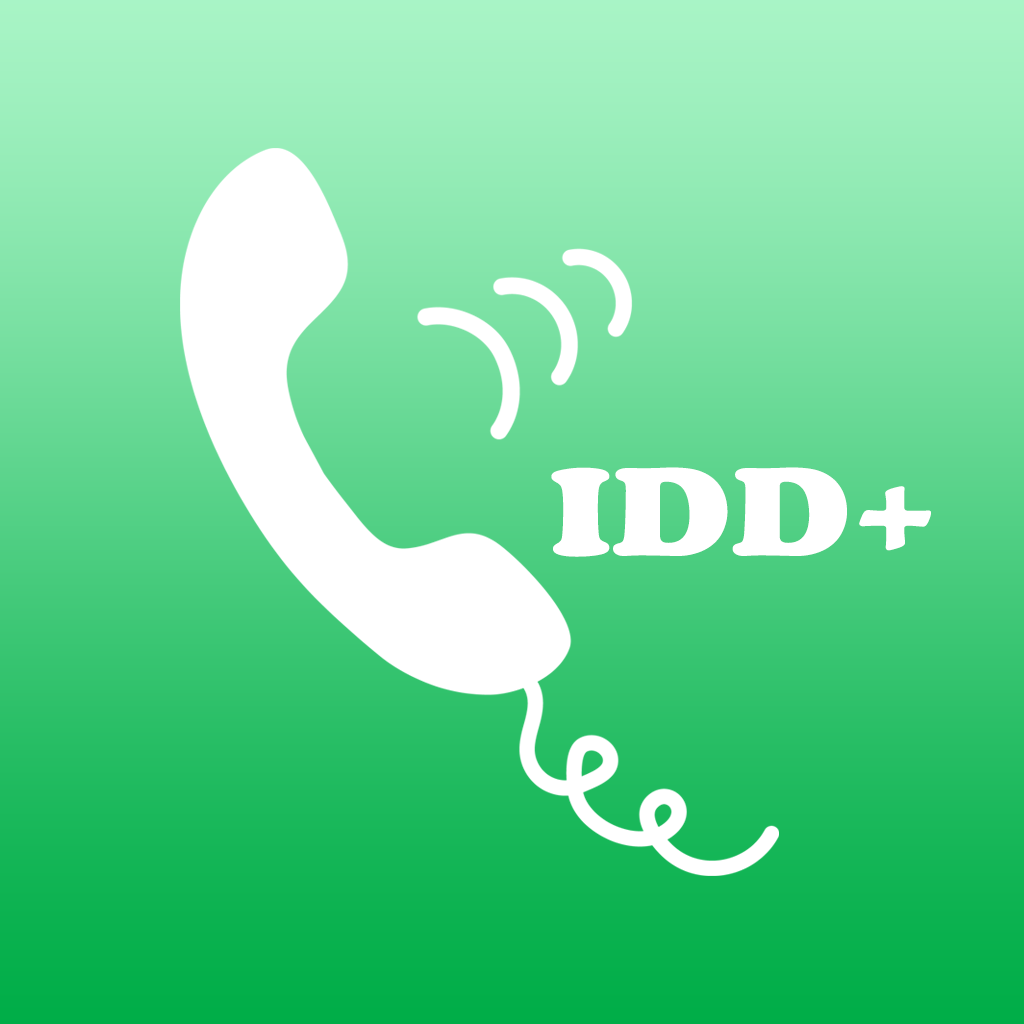
<style>
.page{position:relative;width:1024px;height:1024px}
.page>*{position:absolute;margin:0}
.t1{font:129.4px "CooperBlack";color:#ffffff;scale:1.15 1}
</style>
<div class="page">
<p class="t1" style="left:551px;top:467px;width:380px;height:90px">IDD+</p>
</div>
